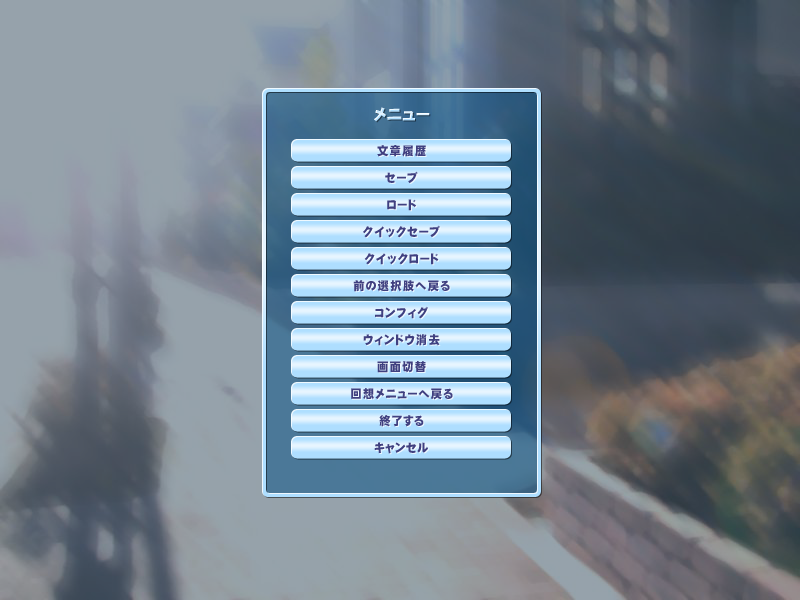
<style>
.page{position:relative;width:800px;height:600px}
.page>*{position:absolute;margin:0}
.t1{font:16px "DFGothic-EB-WING-RKSJ-H";letter-spacing:0.05em}
.t2{font:12px "DFGothic-EB-WING-RKSJ-H";letter-spacing:0.1em;color:#404080;scale:0.95 1}
.t3{font:12px "DFGothic-EB-WING-RKSJ-H";letter-spacing:0.05em;color:#404080;scale:0.95 1}
</style>
<div class="page">
<p class="t1" style="left:374px;top:107px;width:56px;height:15px">メニュー</p>
<p class="t2" style="left:377px;top:145px;width:49px;height:12px">文章履歴</p>
<p class="t2" style="left:385px;top:171px;width:33px;height:12px">セーブ</p>
<p class="t2" style="left:387px;top:199px;width:29px;height:12px">ロード</p>
<p class="t2" style="left:363px;top:225px;width:77px;height:13px">クイックセーブ</p>
<p class="t2" style="left:364px;top:253px;width:75px;height:12px">クイックロード</p>
<p class="t2" style="left:353px;top:280px;width:97px;height:12px">前の選択肢へ戻る</p>
<p class="t2" style="left:375px;top:306px;width:53px;height:13px">コンフィグ</p>
<p class="t2" style="left:363px;top:334px;width:77px;height:12px">ウィンドウ消去</p>
<p class="t2" style="left:377px;top:361px;width:49px;height:12px">画面切替</p>
<p class="t2" style="left:351px;top:388px;width:102px;height:12px">回想メニューへ戻る</p>
<p class="t3" style="left:379px;top:415px;width:45px;height:12px">終了する</p>
<p class="t3" style="left:374px;top:442px;width:54px;height:12px">キャンセル</p>
</div>
